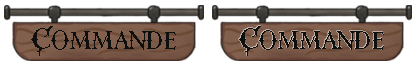
<style>
.page{position:relative;width:416px;height:65px;background:#ffffff}
.page>*{position:absolute;margin:0}
.t1{font:30.3px "RoseKnight-Regular";color:#0e0f0f}
</style>
<div class="page">
<p class="t1" style="left:31px;top:26px;width:145px;height:30px">Commande</p>
<p class="t1" style="left:239px;top:26px;width:145px;height:30px">Commande</p>
</div>
